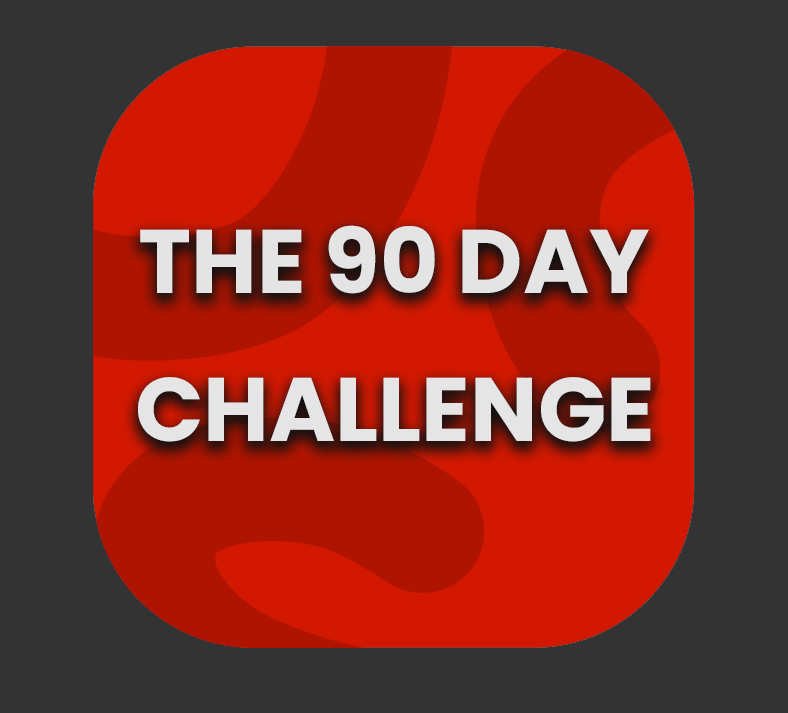
<style>
.page{position:relative;width:788px;height:713px;background:#333333}
.page>*{position:absolute;margin:0}
.t1{font:90px "Poppins-Bold";color:#e4e4e4}
.t2{font:90px "Poppins-Bold";color:#e5e5e5}
</style>
<div class="page">
<p class="t1" style="left:140px;top:225px;width:509px;height:69px">THE 90 DAY</p>
<p class="t2" style="left:138px;top:377px;width:513px;height:65px">CHALLENGE</p>
</div>
